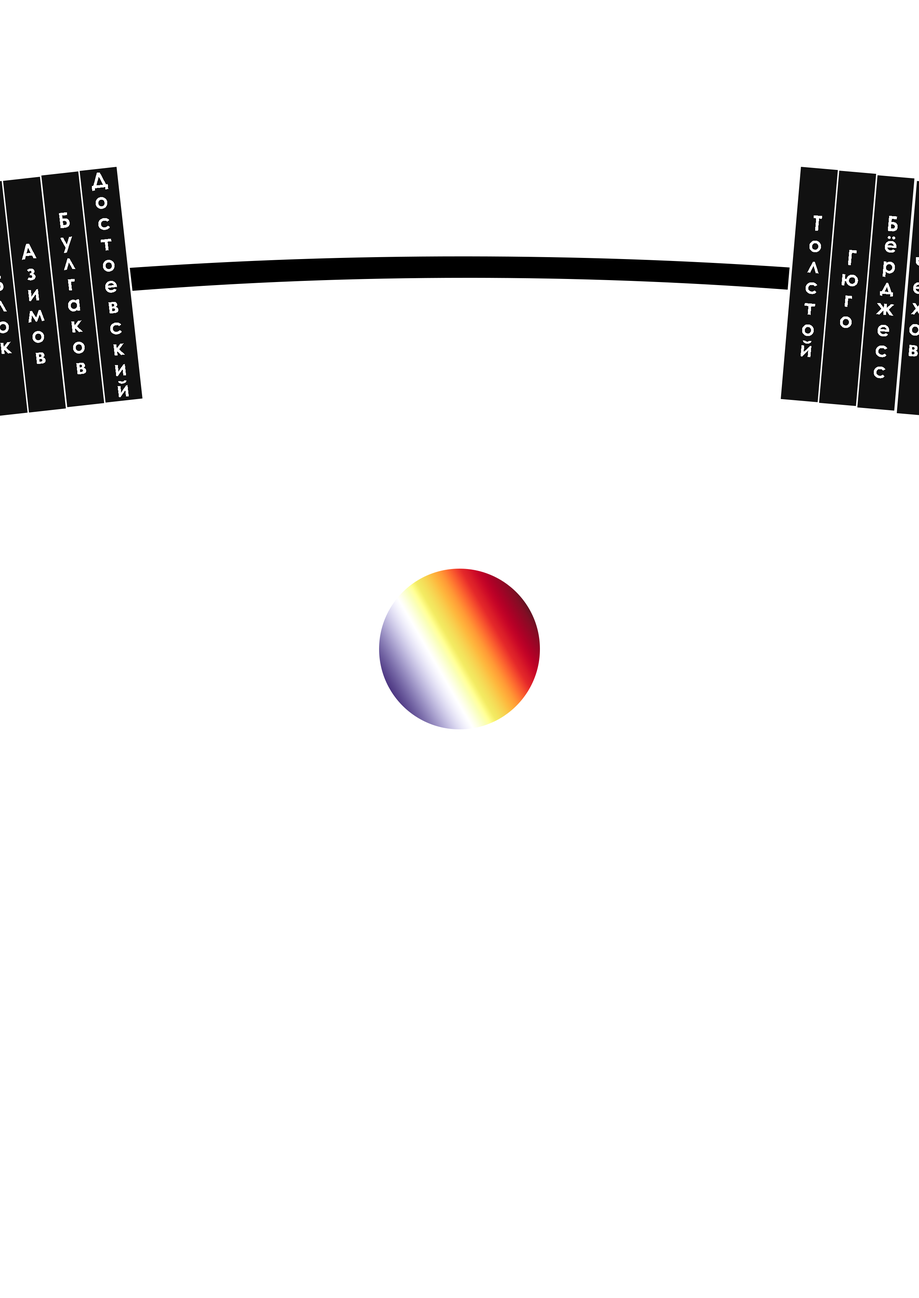
<style>
.page{position:relative;width:919px;height:1298px;background:#ffffff}
.page>*{position:absolute;margin:0}
.t1{font:21px "CenturyGothic-Bold";color:#ffffff}
</style>
<div class="page">
<p class="t1" style="left:92px;top:173px;width:37px;height:224px;rotate:-7deg">Достоевский</p>
<p class="t1" style="left:59px;top:212px;width:27px;height:162px;rotate:-7deg">Булгаков</p>
<p class="t1" style="left:800px;top:215px;width:22px;height:142px;rotate:5deg">Толстой</p>
<p class="t1" style="left:873px;top:216px;width:24px;height:163px;rotate:5deg">Бёрджесс</p>
<p class="t1" style="left:22px;top:244px;width:24px;height:120px;rotate:-7deg">Азимов</p>
<p class="t1" style="left:840px;top:250px;width:18px;height:78px;rotate:5deg">Гюго</p>
</div>
